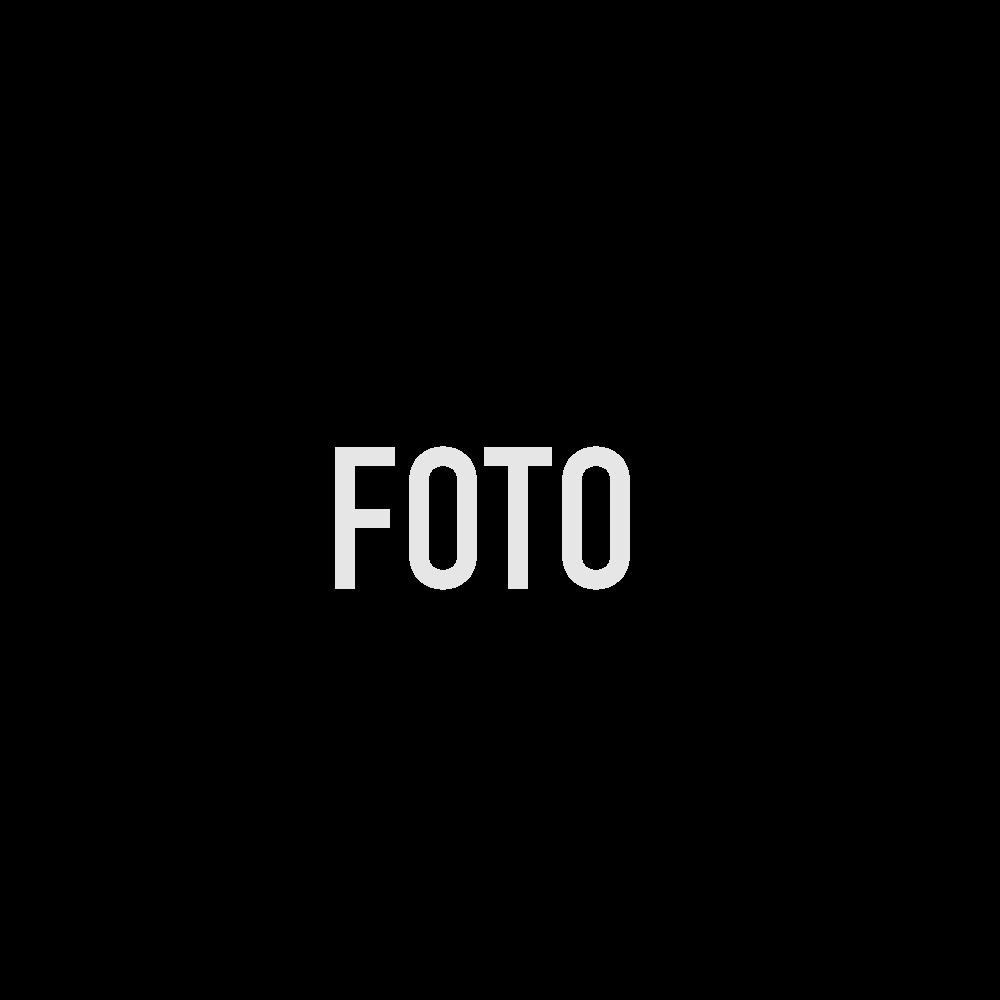
<style>
.page{position:relative;width:1000px;height:1000px;background:#000000}
.page>*{position:absolute;margin:0}
.t1{font:200px "DINEngschrift";color:#e6e6e6}
</style>
<div class="page">
<p class="t1" style="left:335px;top:446px;width:295px;height:144px">FOTO</p>
</div>
